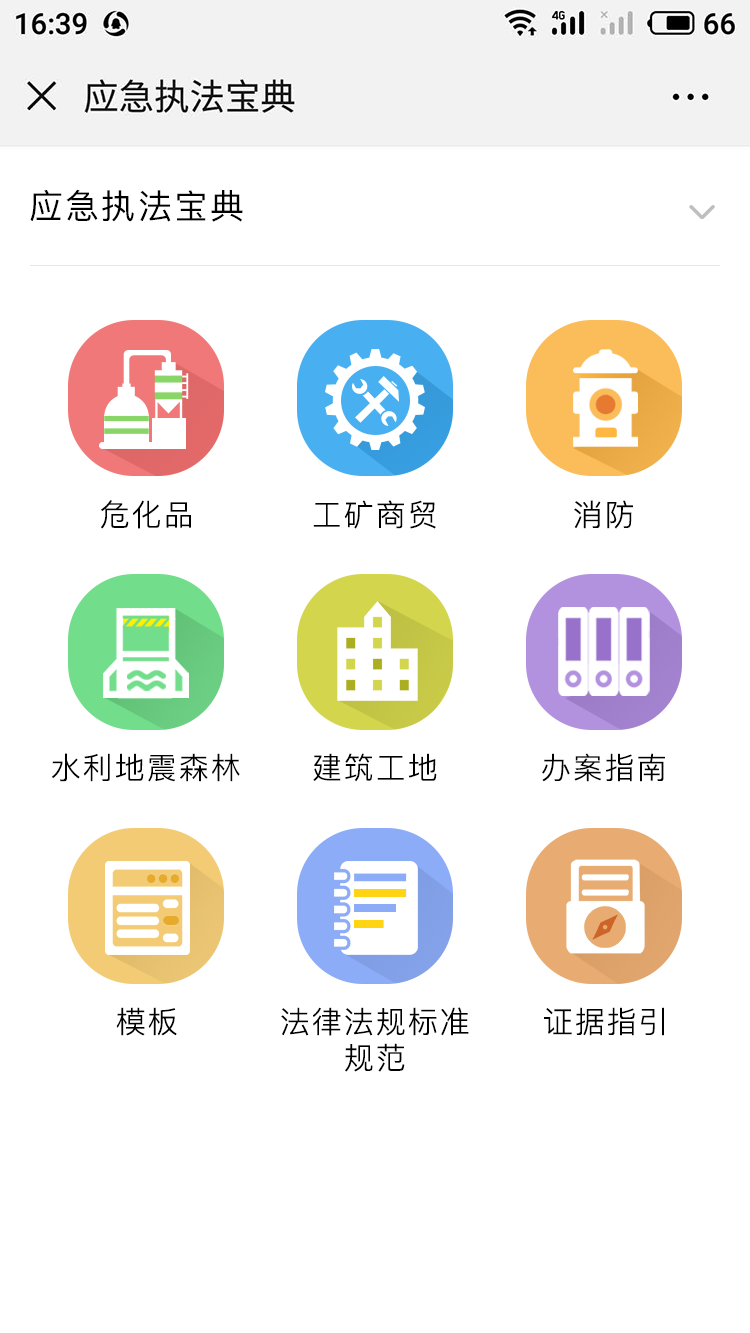
<style>
.page{position:relative;width:750px;height:1333px;background:#ffffff}
.page>*{position:absolute;margin:0}
.t1{font:34px "PingFang-SC-Medium";color:#000000}
.t2{font:30px "PingFang-SC-Regular";color:#000000}
.t3{font:30px/36.1px "PingFang-SC-Regular";color:#000000}
</style>
<div class="page">
<p class="t1" style="left:30px;top:189px;width:213px;height:33px">应急执法宝典</p>
<p class="t2" style="left:101px;top:500px;width:90px;height:29px">危化品</p>
<p class="t2" style="left:313px;top:500px;width:123px;height:29px">工矿商贸</p>
<p class="t2" style="left:574px;top:500px;width:59px;height:29px">消防</p>
<p class="t2" style="left:52px;top:753px;width:188px;height:29px">水利地震森林</p>
<p class="t2" style="left:313px;top:753px;width:124px;height:29px">建筑工地</p>
<p class="t2" style="left:542px;top:753px;width:123px;height:29px">办案指南</p>
<p class="t2" style="left:116px;top:1007px;width:61px;height:29px">模板</p>
<p class="t3" style="left:281px;top:1007px;width:188px;height:65px;text-align:center">法律法规标准<br>规范</p>
<p class="t2" style="left:544px;top:1007px;width:120px;height:29px">证据指引</p>
</div>
